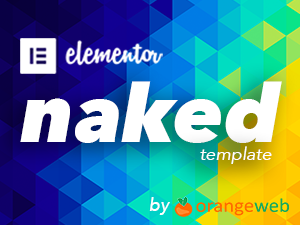
<style>
.page{position:relative;width:300px;height:225px}
.page>*{position:absolute;margin:0}
.t1{font:80px "AvenirNext-HeavyItalic";letter-spacing:0.01em;color:#ffffff}
.t2{font:18px "Avenir-Oblique";letter-spacing:0.01em;color:#ffffff}
.t3{font:18px "Avenir-MediumOblique";letter-spacing:0.01em;color:#ffffff}
</style>
<div class="page">
<p class="t1" style="left:20px;top:81px;width:262px;height:62px">naked</p>
<p class="t2" style="left:200px;top:146px;width:72px;height:18px">template</p>
<p class="t3" style="left:149px;top:197px;width:21px;height:18px">by</p>
</div>
